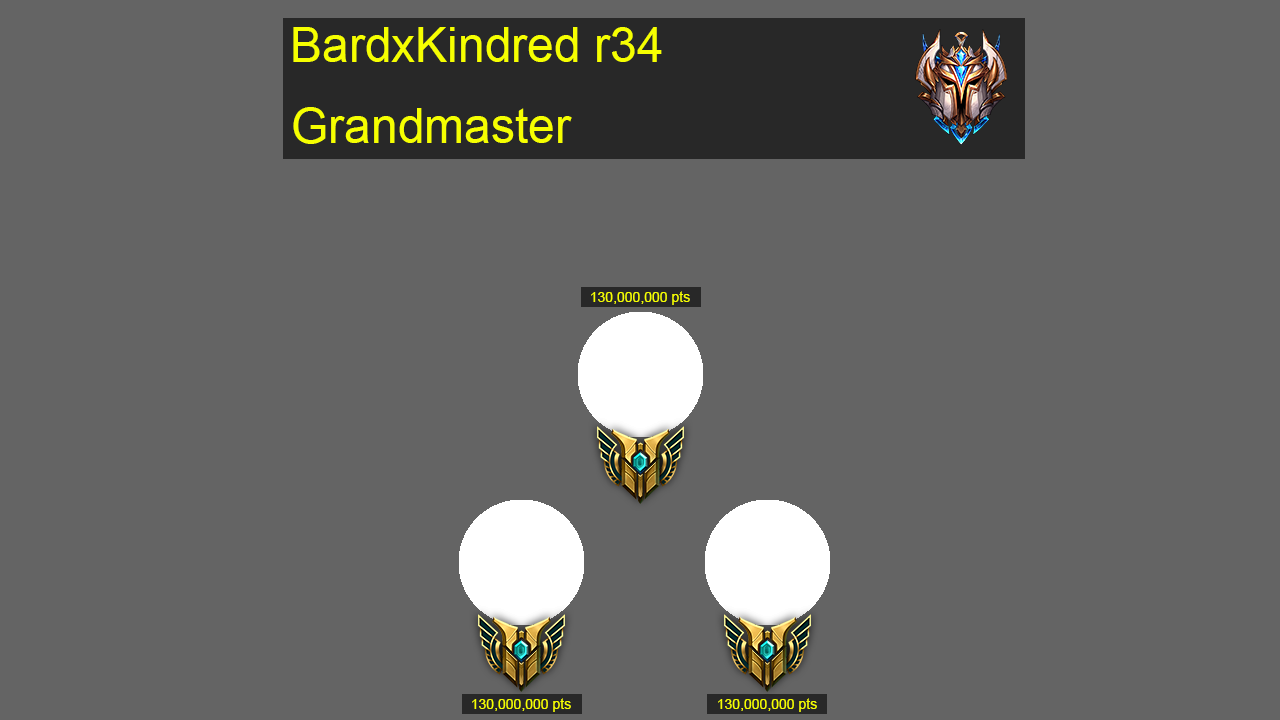
<style>
.page{position:relative;width:1280px;height:720px;background:#646464}
.page>*{position:absolute;margin:0}
.t1{font:48px "ArialMT";color:#f6ff00}
.t2{font:14px "ArialMT";color:#f6ff00}
</style>
<div class="page">
<p class="t1" style="left:293px;top:27px;width:369px;height:35px">BardxKindred r34</p>
<p class="t1" style="left:293px;top:107px;width:279px;height:37px">Grandmaster</p>
<p class="t2" style="left:591px;top:291px;width:99px;height:14px">130,000,000 pts</p>
<p class="t2" style="left:472px;top:698px;width:99px;height:14px">130,000,000 pts</p>
<p class="t2" style="left:718px;top:698px;width:99px;height:14px">130,000,000 pts</p>
</div>
